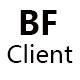
<style>
.page{position:relative;width:80px;height:80px;background:#ffffff}
.page>*{position:absolute;margin:0}
.t1{font:32px "MicrosoftYaHeiUI-Bold";color:#040000}
.t2{font:24px "MicrosoftYaHeiUI";color:#040000}
</style>
<div class="page">
<p class="t1" style="left:20px;top:10px;width:37px;height:25px">BF</p>
<p class="t2" style="left:7px;top:44px;width:66px;height:19px">Client</p>
</div>
